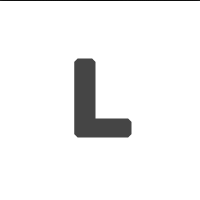
<style>
.page{position:relative;width:200px;height:200px;background:#ffffff}
.page>*{position:absolute;margin:0}
.t1{font:100.3px "Arial-BoldMT";letter-spacing:0.025em;color:#454545;font-weight:bold}
</style>
<div class="page">
<p class="t1" style="left:74px;top:57px;width:58px;height:80px">L</p>
</div>
